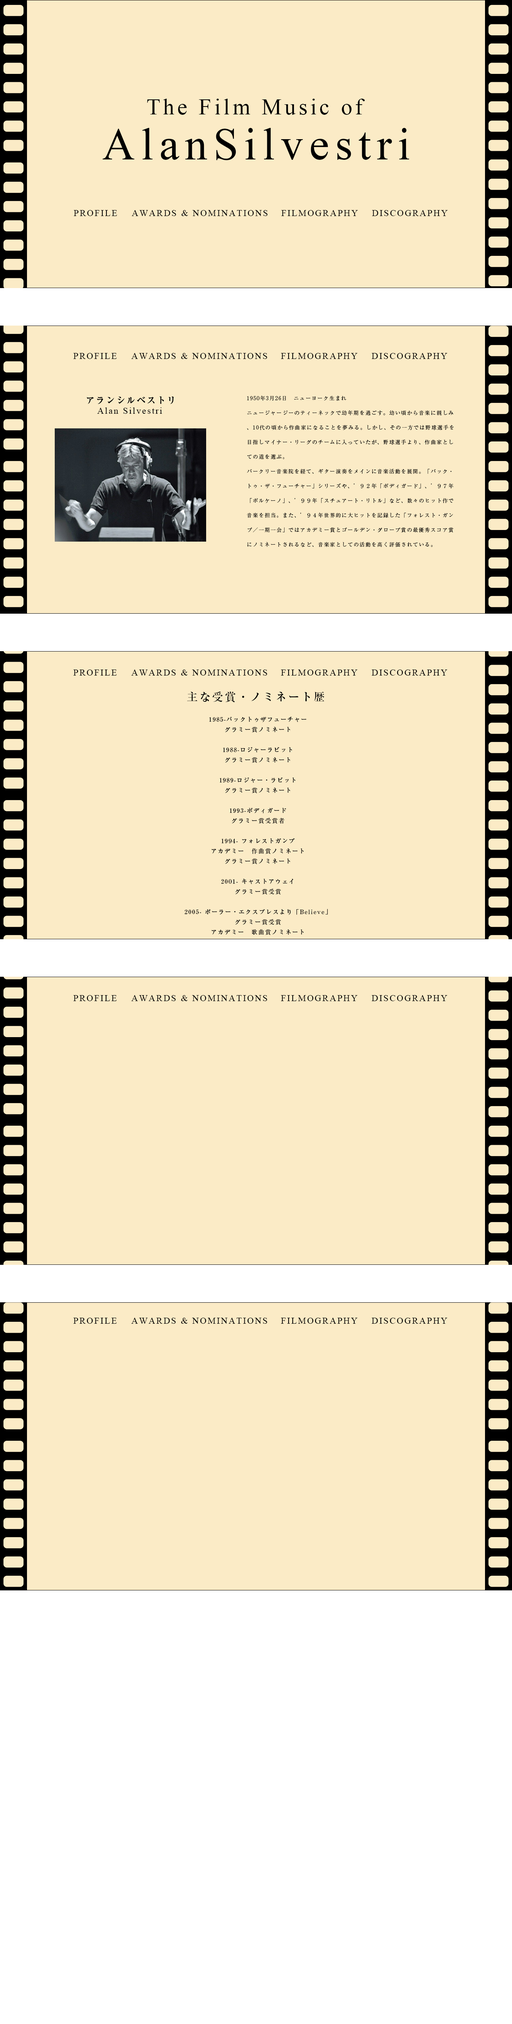
<style>
.page{position:relative;width:512px;height:2024px;background:#fbebc6}
.page>*{position:absolute;margin:0}
.t1{font:22.5px "TimesNewRomanPSMT";letter-spacing:0.13em;color:#000000}
.t2{font:45px "TimesNewRomanPSMT";letter-spacing:0.13em;color:#000000}
.t3{font:9px "TimesNewRomanPSMT";letter-spacing:0.13em;color:#000000}
.t4{font:9px "RyuminPro-Bold";letter-spacing:0.13em;color:#000000}
.t5{font:5.2px/14.6px "RyuminPro-Regular";letter-spacing:0.13em;color:#000000}
.t6{font:5.2px/16.1px "RyuminPro-Regular";letter-spacing:0.13em;color:#000000}
.t7{font:11.2px "RyuminPro-Medium";letter-spacing:0.13em;color:#000000}
.t8{font:6px/10.1px "RyuminPro-Medium";letter-spacing:0.13em;color:#000000}
</style>
<div class="page">
<p class="t1" style="left:147px;top:99px;width:218px;height:16px">The Film Music of</p>
<p class="t2" style="left:102px;top:128px;width:308px;height:32px">AlanSilvestri</p>
<p class="t3" style="left:74px;top:210px;width:43px;height:6px">PROFILE</p>
<p class="t3" style="left:132px;top:210px;width:136px;height:6px">AWARDS &amp; NOMINATIONS</p>
<p class="t3" style="left:281px;top:210px;width:77px;height:6px">FILMOGRAPHY</p>
<p class="t3" style="left:372px;top:210px;width:76px;height:6px">DISCOGRAPHY</p>
<p class="t3" style="left:74px;top:353px;width:43px;height:6px">PROFILE</p>
<p class="t3" style="left:131px;top:353px;width:136px;height:6px">AWARDS &amp; NOMINATIONS</p>
<p class="t3" style="left:281px;top:353px;width:77px;height:6px">FILMOGRAPHY</p>
<p class="t3" style="left:372px;top:353px;width:76px;height:6px">DISCOGRAPHY</p>
<p class="t4" style="left:87px;top:396px;width:87px;height:8px">アランシルベストリ</p>
<p class="t5" style="left:247px;top:395px;width:207px;height:152px">1950年3月26日　ニューヨーク生まれ<br>ニュージャージーのティーネックで幼年期を過ごす。幼い頃から音楽に親しみ、10代の頃から作曲家になることを夢みる。しかし、その一方では野球選手を目指しマイナー・リーグのチームに入っていたが、野球選手より、作曲家としての道を選ぶ。<br>バークリー音楽院を経て、ギター演奏をメインに音楽活動を展開。「バック・トゥ・ザ・フューチャー」シリーズや、’９２年「ボディガード」、’９７年「ボルケーノ」、’９９年「スチュアート・リトル」など、数々のヒット作で音楽を担当。また、’９４年世界的に大ヒットを記録した「フォレスト・ガンプ／一期一会」ではアカデミー賞とゴールデン・グローブ賞の最優秀スコア賞にノミネートされるなど、音楽家としての活動を高く評価されている<span class="t6">。</span></p>
<p class="t3" style="left:97px;top:407px;width:65px;height:7px">Alan Silvestri</p>
<p class="t3" style="left:74px;top:669px;width:43px;height:6px">PROFILE</p>
<p class="t3" style="left:131px;top:669px;width:136px;height:7px">AWARDS &amp; NOMINATIONS</p>
<p class="t3" style="left:281px;top:669px;width:77px;height:6px">FILMOGRAPHY</p>
<p class="t3" style="left:372px;top:669px;width:76px;height:6px">DISCOGRAPHY</p>
<p class="t7" style="left:187px;top:691px;width:138px;height:11px">主な受賞・ノミネート歴</p>
<p class="t8" style="left:184px;top:717px;width:144px;height:218px;text-align:center">1985-バックトゥザフューチャー<br>グラミー賞ノミネート<br><br>1988-ロジャーラビット<br>グラミー賞ノミネート<br><br>1989-ロジャー・ラビット<br>グラミー賞ノミネート<br><br>1993-ボディガード<br>グラミー賞受賞者<br><br>1994- フォレストガンプ<br>アカデミー　作曲賞ノミネート<br>グラミー賞ノミネート<br><br>2001- キャストアウェイ<br>グラミー賞受賞<br><br>2005- ポーラー・エクスプレスより「Believe」<br>グラミー賞受賞<br>アカデミー　謌曲賞ノミネート</p>
<p class="t3" style="left:74px;top:995px;width:43px;height:6px">PROFILE</p>
<p class="t3" style="left:131px;top:995px;width:136px;height:6px">AWARDS &amp; NOMINATIONS</p>
<p class="t3" style="left:281px;top:995px;width:77px;height:6px">FILMOGRAPHY</p>
<p class="t3" style="left:372px;top:995px;width:76px;height:6px">DISCOGRAPHY</p>
<p class="t3" style="left:74px;top:1317px;width:43px;height:6px">PROFILE</p>
<p class="t3" style="left:131px;top:1317px;width:136px;height:7px">AWARDS &amp; NOMINATIONS</p>
<p class="t3" style="left:281px;top:1317px;width:77px;height:6px">FILMOGRAPHY</p>
<p class="t3" style="left:372px;top:1317px;width:76px;height:6px">DISCOGRAPHY</p>
</div>
